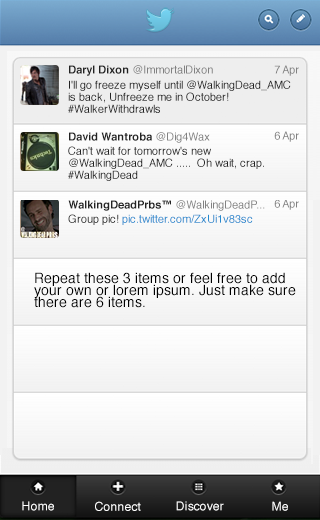
<style>
.page{position:relative;width:320px;height:520px}
.page>*{position:absolute;margin:0}
.t1{font:11px "Helvetica";color:#818181}
.t2{font:11px "Helvetica-Bold";color:#222222}
.t3{font:11px/12px "Helvetica";color:#222222}
.t4{font:11px "Helvetica";color:#2489ce}
.t5{font:11px "Helvetica";color:#222222}
.t6{font:14px/12px "Helvetica";color:#000000}
.t7{font:12px "Helvetica";color:#ffffff}
</style>
<div class="page">
<p class="t1" style="left:69px;top:65px;width:144px;height:11px"><span class="t2">Daryl Dixon ‏</span>@ImmortalDixon</p>
<p class="t1" style="left:274px;top:65px;width:25px;height:11px">7 Apr</p>
<p class="t3" style="left:68px;top:80px;width:223px;height:33px">I'll go freeze myself until @WalkingDead_AMC is back, Unfreeze me in October! #WalkerWithdrawls</p>
<p class="t2" style="left:69px;top:132px;width:141px;height:11px">David Wantroba ‏<span class="t1">@Dig4Wax</span></p>
<p class="t1" style="left:274px;top:131px;width:25px;height:11px">6 Apr</p>
<p class="t3" style="left:68px;top:146px;width:196px;height:35px">Can't wait for tomorrow's new @WalkingDead_AMC .....  Oh wait, crap. #WalkingDead</p>
<p class="t2" style="left:68px;top:200px;width:197px;height:11px">WalkingDeadPrbs™ ‏<span class="t1">@WalkingDeadP...</span></p>
<p class="t1" style="left:274px;top:199px;width:25px;height:11px">6 Apr</p>
<p class="t4" style="left:68px;top:214px;width:185px;height:11px"><span class="t5"><br>Group pic! </span>pic.twitter.com/ZxUi1v83sc</p>
<p class="t6" style="left:34px;top:272px;width:262px;height:36px">Repeat these 3 items or feel free to add <br>your own or lorem ipsum. Just make sure<br>there are 6 items.</p>
<p class="t7" style="left:22px;top:501px;width:32px;height:10px">Home</p>
<p class="t7" style="left:95px;top:501px;width:46px;height:10px">Connect</p>
<p class="t7" style="left:176px;top:501px;width:48px;height:10px">Discover</p>
<p class="t7" style="left:272px;top:501px;width:16px;height:10px">Me</p>
</div>
